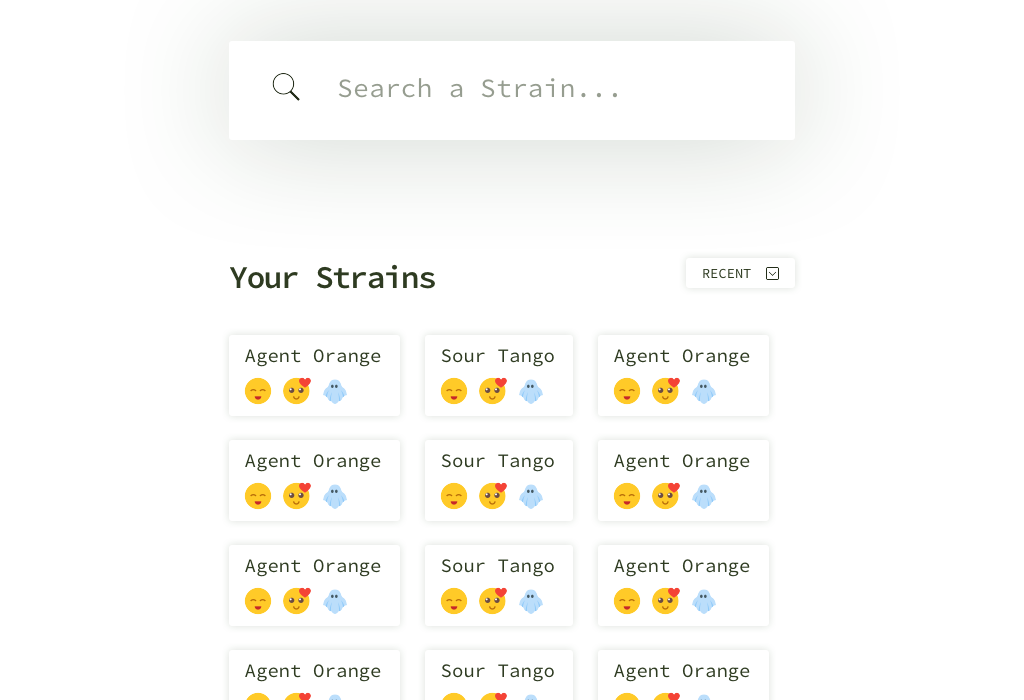
<style>
.page{position:relative;width:1024px;height:700px;background:#ffffff}
.page>*{position:absolute;margin:0}
.t1{font:26.5px "SourceCodePro-Regular";color:#969d90}
.t2{font:31.8px "SourceCodePro-Semibold";letter-spacing:-0.06em;color:#2e3b21}
.t3{font:13.8px "SourceCodePro-Regular";color:#2e3b21;text-transform:uppercase}
.t4{font:19.1px "SourceCodePro-Regular";color:#2e3b21}
</style>
<div class="page">
<p class="t1" style="left:338px;top:78px;width:279px;height:20px">Search a Strain...</p>
<p class="t2" style="left:230px;top:264px;width:205px;height:25px">Your Strains</p>
<p class="t3" style="left:703px;top:268px;width:48px;height:11px">RECENT</p>
<p class="t4" style="left:245px;top:349px;width:136px;height:18px">Agent Orange</p>
<p class="t4" style="left:441px;top:349px;width:113px;height:18px">Sour Tango</p>
<p class="t4" style="left:614px;top:349px;width:136px;height:18px">Agent Orange</p>
<p class="t4" style="left:245px;top:454px;width:136px;height:18px">Agent Orange</p>
<p class="t4" style="left:441px;top:454px;width:113px;height:18px">Sour Tango</p>
<p class="t4" style="left:614px;top:454px;width:136px;height:18px">Agent Orange</p>
<p class="t4" style="left:245px;top:559px;width:136px;height:18px">Agent Orange</p>
<p class="t4" style="left:441px;top:559px;width:113px;height:18px">Sour Tango</p>
<p class="t4" style="left:614px;top:559px;width:136px;height:18px">Agent Orange</p>
<p class="t4" style="left:245px;top:664px;width:136px;height:18px">Agent Orange</p>
<p class="t4" style="left:441px;top:664px;width:113px;height:18px">Sour Tango</p>
<p class="t4" style="left:614px;top:664px;width:136px;height:18px">Agent Orange</p>
</div>
